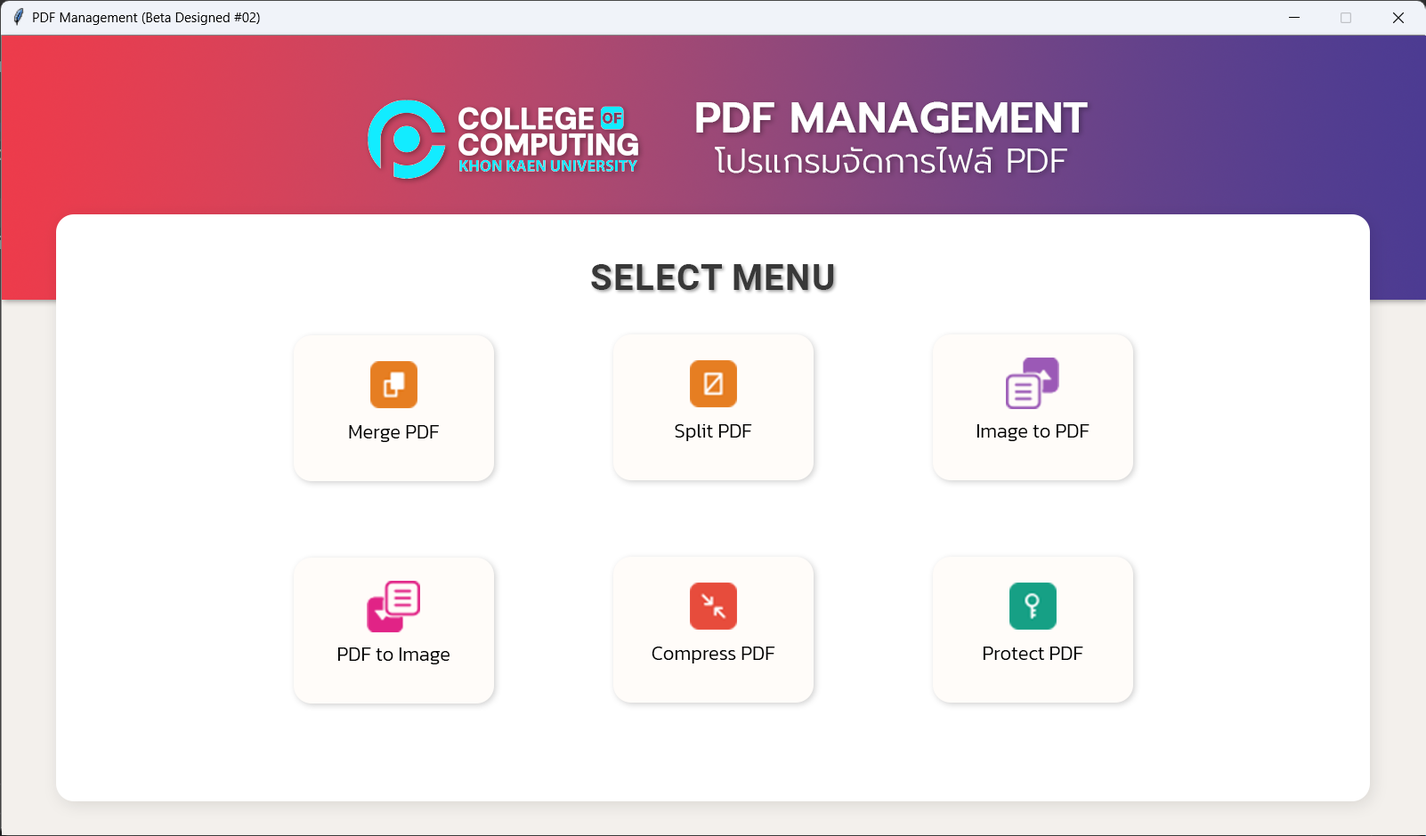
<style>
.page{position:relative;width:1426px;height:836px;background:#ffffff}
.page>*{position:absolute;margin:0}
.t1{font:33.8px "Prompt-Light";color:#ffffff;text-transform:uppercase}
.t2{font:42.7px "Prompt-SemiBold";color:#ffffff;text-transform:uppercase}
.t3{font:35.6px "Roboto-Bold";color:#383838;text-transform:uppercase}
.t4{font:19.6px "Kanit-Light";color:#000000}
</style>
<div class="page">
<p class="t1" style="left:696px;top:101px;width:391px;height:73px;text-align:center"><span class="t2">PDF Management<br></span>โปรแกรมจัดการไฟล์ PDF</p>
<p class="t3" style="left:591px;top:264px;width:243px;height:26px">select menu</p>
<p class="t4" style="left:349px;top:425px;width:90px;height:17px">Merge PDF</p>
<p class="t4" style="left:675px;top:424px;width:77px;height:17px">Split PDF</p>
<p class="t4" style="left:976px;top:424px;width:113px;height:17px">Image to PDF</p>
<p class="t4" style="left:337px;top:648px;width:112px;height:17px">PDF to Image</p>
<p class="t4" style="left:651px;top:647px;width:124px;height:17px">Compress PDF</p>
<p class="t4" style="left:982px;top:647px;width:101px;height:13px">Protect PDF</p>
</div>
